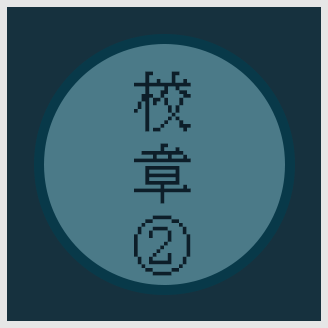
<style>
.page{position:relative;width:328px;height:328px;background:#16313e}
.page>*{position:absolute;margin:0}
.t1{font:60px "KH-Dot-kagurazaka-16";letter-spacing:0.12em;color:#0a192d}
</style>
<div class="page">
<p class="t1" style="left:134px;top:71px;width:57px;height:205px;text-align:center">校章<br>②</p>
</div>
